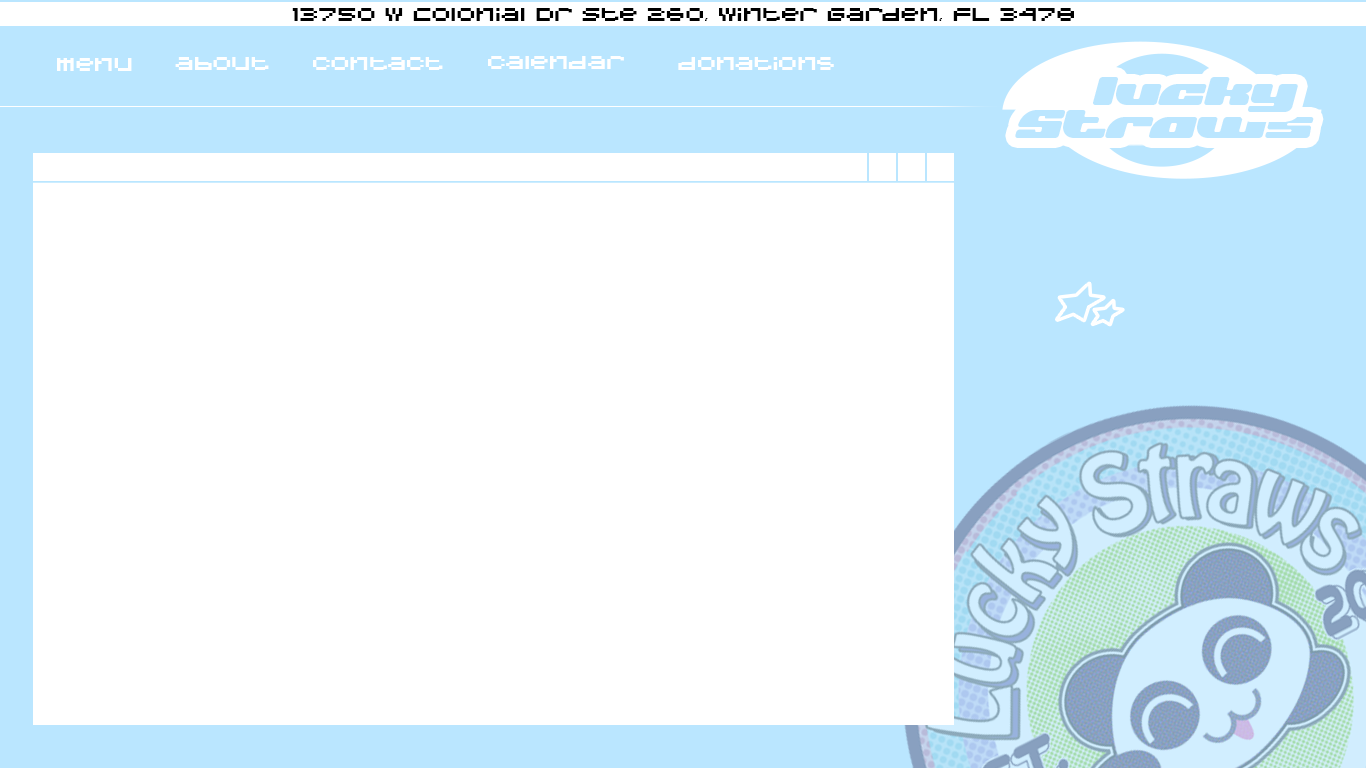
<style>
.page{position:relative;width:1366px;height:768px;background:#ffffff}
.page>*{position:absolute;margin:0}
.t1{font:31px "BitGameRegular";color:#000000}
.t2{font:31px "BitGameRegular";color:#ffffff}
.t3{font:40.1px "NeoSyber-Italic";color:#bbe6ff}
</style>
<div class="page">
<p class="t1" style="left:292px;top:8px;width:782px;height:13px">13750 W Colonial Dr Ste 260, Winter Garden, FL 3478</p>
<p class="t2" style="left:57px;top:58px;width:75px;height:13px">menu</p>
<p class="t2" style="left:175px;top:57px;width:94px;height:13px">about</p>
<p class="t2" style="left:313px;top:57px;width:130px;height:13px">contact</p>
<p class="t2" style="left:488px;top:56px;width:136px;height:13px">calendar</p>
<p class="t2" style="left:678px;top:57px;width:156px;height:13px">donations</p>
<p class="t3" style="left:1093px;top:77px;width:205px;height:35px">lucky</p>
<p class="t3" style="left:1015px;top:110px;width:299px;height:28px">Straws</p>
</div>
